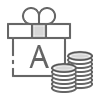
<style>
.page{position:relative;width:100px;height:100px;background:#ffffff}
.page>*{position:absolute;margin:0}
.t1{font:32.1px "ArialMT";letter-spacing:-0.01em;color:#646464;scale:0.9 1}
</style>
<div class="page">
<p class="t1" style="left:29px;top:45px;width:20px;height:23px">A</p>
</div>
